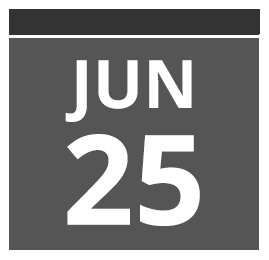
<style>
.page{position:relative;width:269px;height:260px;background:#555555}
.page>*{position:absolute;margin:0}
.t1{font:66.7px/116.7px "OpenSans-Bold";color:#ffffff}
.t2{font:125px/116.7px "OpenSans-Bold";color:#ffffff}
</style>
<div class="page">
<p class="t1" style="left:65px;top:60px;width:135px;height:166px;text-align:center">JUN<br><span class="t2">25</span></p>
</div>
